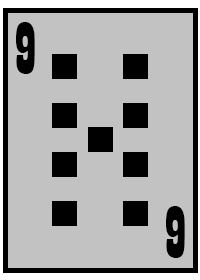
<style>
.page{position:relative;width:200px;height:280px;background:#c2c2c2}
.page>*{position:absolute;margin:0}
.t1{font:75px "Playbill";color:#000000}
</style>
<div class="page">
<p class="t1" style="left:16px;top:22px;width:19px;height:52px">9</p>
<p class="t1" style="left:166px;top:206px;width:19px;height:52px">9</p>
</div>
